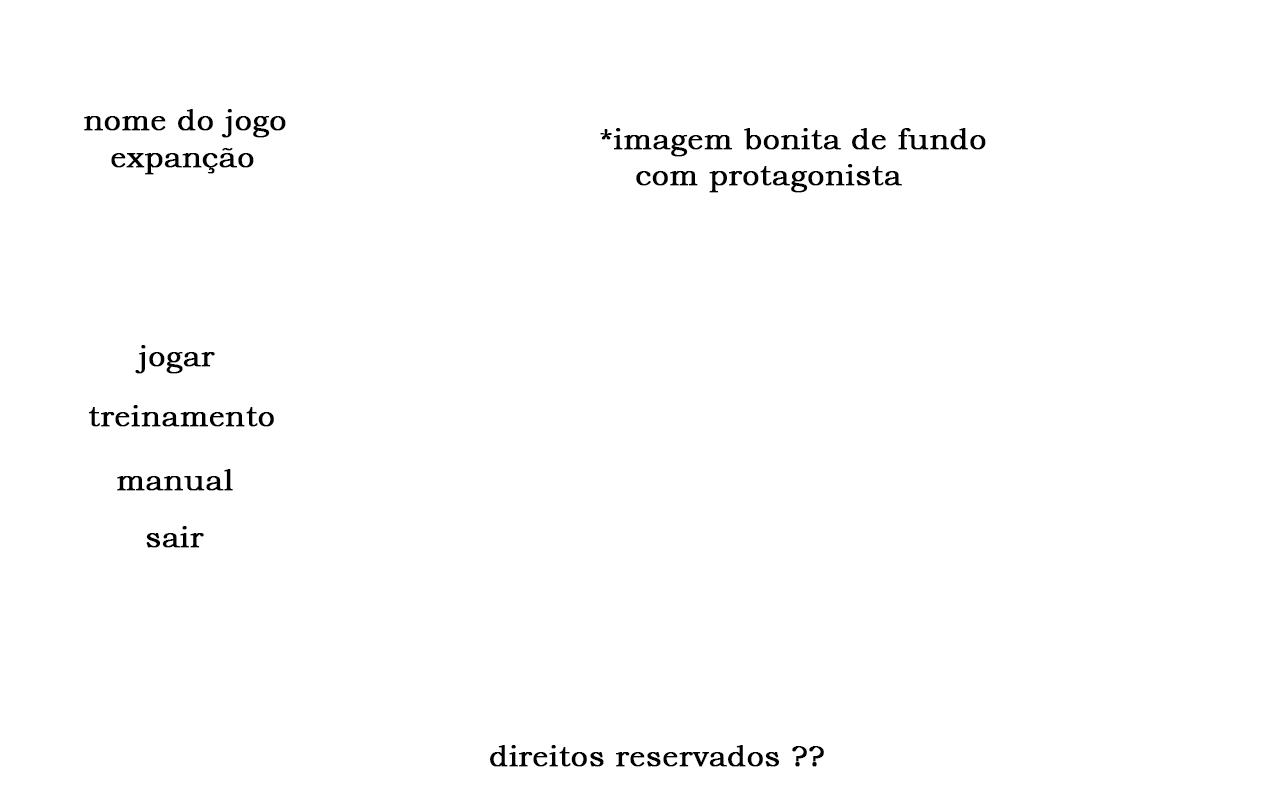
<style>
.page{position:relative;width:1280px;height:790px;background:#ffffff}
.page>*{position:absolute;margin:0}
.t1{font:30px "BookmanOldStyle";color:#000000;font-weight:bold}
</style>
<div class="page">
<p class="t1" style="left:84px;top:109px;width:202px;height:29px">nome do jogo</p>
<p class="t1" style="left:600px;top:128px;width:386px;height:65px">*imagem bonita de fundo <br> com protagonista</p>
<p class="t1" style="left:111px;top:148px;width:143px;height:27px">expanção</p>
<p class="t1" style="left:135px;top:345px;width:80px;height:29px">jogar</p>
<p class="t1" style="left:89px;top:405px;width:185px;height:22px">treinamento</p>
<p class="t1" style="left:117px;top:469px;width:116px;height:22px">manual</p>
<p class="t1" style="left:146px;top:526px;width:58px;height:22px">sair</p>
<p class="t1" style="left:490px;top:745px;width:334px;height:22px">direitos reservados ??</p>
</div>
